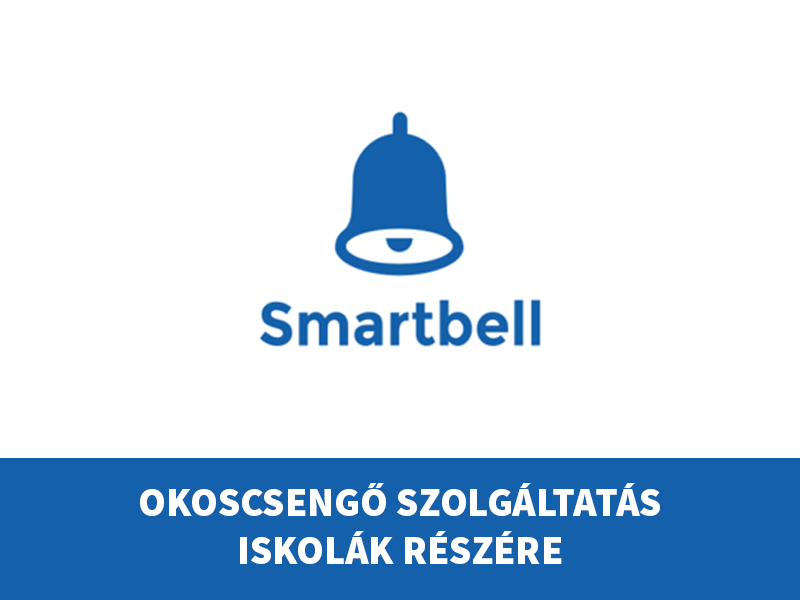
<style>
.page{position:relative;width:800px;height:600px;background:#ffffff}
.page>*{position:absolute;margin:0}
.t1{font:40px "SourceSansPro-Black";color:#ffffff;text-transform:uppercase}
</style>
<div class="page">
<p class="t1" style="left:140px;top:483px;width:520px;height:81px;text-align:center">Okoscsengő szolgáltatás<br>iskolák részére</p>
</div>
